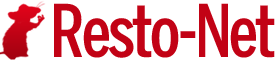
<style>
.page{position:relative;width:275px;height:64px;background:#ffffff}
.page>*{position:absolute;margin:0}
.t1{font:72px "BentonSansComp-Medium";letter-spacing:-0.04em;color:#c20215}
</style>
<div class="page">
<p class="t1" style="left:54px;top:3px;width:221px;height:55px">Resto-Net</p>
</div>
